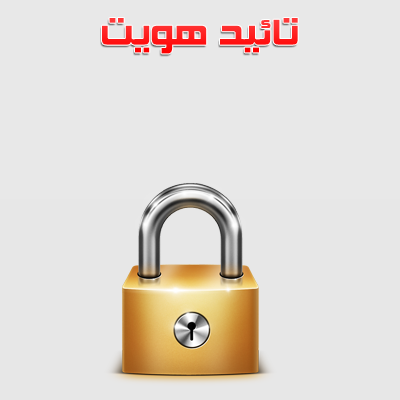
<style>
.page{position:relative;width:400px;height:400px;background:#e8e8e8}
.page>*{position:absolute;margin:0}
.t1{font:50.8px "Mj_ExtenderX4Deeper";color:#ff1a1a}
</style>
<div class="page">
<p class="t1" style="left:102px;top:18px;width:196px;height:36px">تائید هویت</p>
</div>
